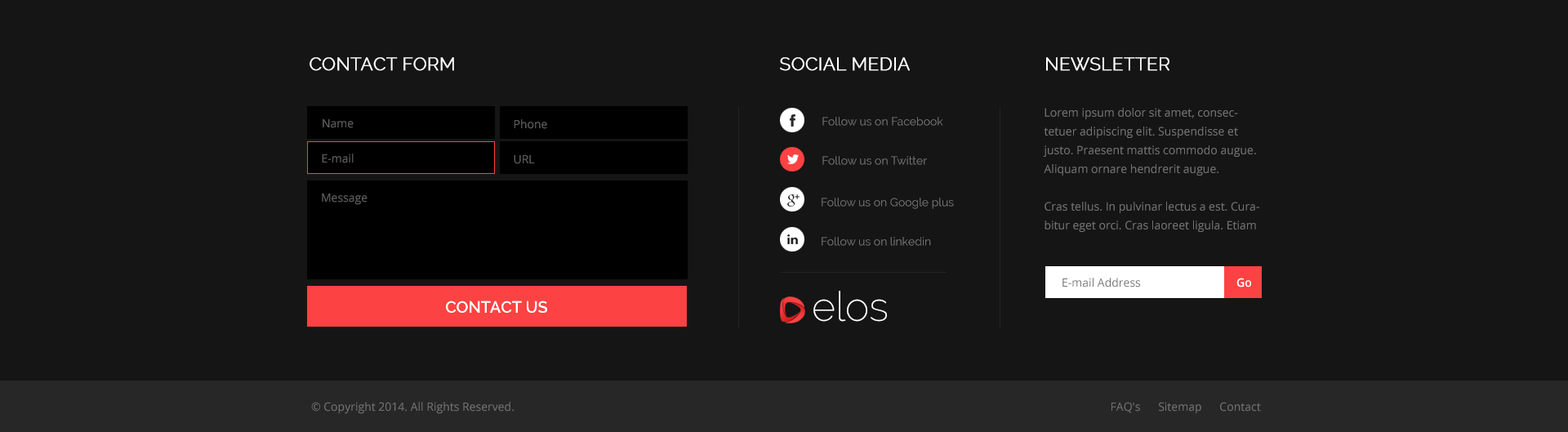
<style>
.page{position:relative;width:1568px;height:432px;background:#151515}
.page>*{position:absolute;margin:0}
.t1{font:18px "Raleway-Light";color:#ffffff;text-transform:uppercase;font-weight:bold}
.t2{font:11.4px/18.8px "OpenSans";color:#727272}
.t3{font:11.4px "OpenSans";color:#626262}
.t4{font:11.4px "Raleway";color:#727272}
.t5{font:11.4px "OpenSans";color:#727272}
.t6{font:11.4px "OpenSans-Semibold";color:#ffffff}
.t7{font:40.8px "Raleway-ExtraLight";color:#ffffff}
.t8{font:16.3px "Raleway-SemiBold";color:#ffffff;text-transform:uppercase}
</style>
<div class="page">
<p class="t1" style="left:310px;top:57px;width:144px;height:14px">Contact form</p>
<p class="t1" style="left:780px;top:57px;width:130px;height:14px">Social media</p>
<p class="t1" style="left:1046px;top:57px;width:123px;height:14px">Newsletter</p>
<p class="t2" style="left:1043px;top:108px;width:216px;height:124px">Lorem ipsum dolor sit amet, consectetuer adipiscing elit. Suspendisse et justo. Praesent mattis commodo augue. Aliquam ornare hendrerit augue. <br><br>Cras tellus. In pulvinar lectus a est. Curabitur eget orci. Cras laoreet ligula. Etiam sit amet dolor.</p>
<p class="t3" style="left:323px;top:119px;width:31px;height:9px">Name</p>
<p class="t3" style="left:514px;top:119px;width:33px;height:10px">Phone</p>
<p class="t4" style="left:822px;top:117px;width:121px;height:9px">Follow us on Facebook</p>
<p class="t3" style="left:322px;top:154px;width:32px;height:9px">E-mail</p>
<p class="t3" style="left:514px;top:155px;width:21px;height:9px">URL</p>
<p class="t4" style="left:822px;top:156px;width:105px;height:9px">Follow us on Twitter</p>
<p class="t3" style="left:322px;top:194px;width:46px;height:11px">Message</p>
<p class="t4" style="left:822px;top:198px;width:132px;height:11px">Follow us on Google plus</p>
<p class="t4" style="left:822px;top:237px;width:109px;height:9px">Follow us on linkedin</p>
<p class="t5" style="left:1062px;top:278px;width:78px;height:9px">E-mail Address</p>
<p class="t6" style="left:1236px;top:278px;width:15px;height:9px">Go</p>
<p class="t7" style="left:813px;top:291px;width:74px;height:31px">elos</p>
<p class="t8" style="left:446px;top:301px;width:101px;height:12px">contact us</p>
<p class="t5" style="left:311px;top:402px;width:203px;height:12px">© Copyright 2014. All Rights Reserved.</p>
<p class="t5" style="left:1111px;top:402px;width:150px;height:12px">FAQ's      Sitemap      Contact</p>
</div>
